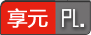
<style>
.page{position:relative;width:91px;height:35px;background:#e72112}
.page>*{position:absolute;margin:0}
.t1{font:20px "MicrosoftYaHei";color:#ffffff;font-weight:bold}
</style>
<div class="page">
<p class="t1" style="left:7px;top:8px;width:41px;height:20px">享元</p>
</div>
